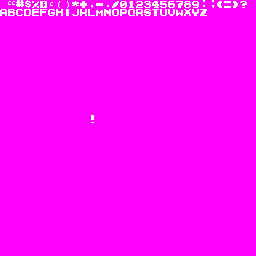
<style>
.page{position:relative;width:256px;height:256px;background:#ff00ff}
.page>*{position:absolute;margin:0}
.t1{font:8px "Toronto";color:#ffffff}
.t2{font:6.4px "Toronto";color:#ffffff}
.t3{font:7.4px "Toronto";color:#ffffff}
.t4{font:8px "MyriadPro-Regular";color:#ffffff}
.t5{font:7px "Toronto";color:#ffffff}
.t6{font:7.5px "Toronto";color:#ffffff}
.t7{font:7.3px "Toronto";color:#ffffff}
.t8{font:6.3px "Toronto";color:#ffffff}
.t9{font:7.2px "Toronto";color:#ffffff}
</style>
<div class="page">
<p class="t1" style="left:8px;top:1px;width:7px;height:4px">“</p>
<p class="t1" style="left:16px;top:0px;width:8px;height:7px">#</p>
<p class="t2" style="left:25px;top:0px;width:6px;height:8px">$</p>
<p class="t3" style="left:32px;top:1px;width:7px;height:7px">%</p>
<p class="t3" style="left:40px;top:1px;width:7px;height:7px">&amp;</p>
<p class="t1" style="left:50px;top:2px;width:3px;height:4px">‘</p>
<p class="t4" style="left:58px;top:1px;width:2px;height:7px">(</p>
<p class="t4" style="left:67px;top:1px;width:2px;height:7px">)</p>
<p class="t1" style="left:72px;top:1px;width:7px;height:5px">*</p>
<p class="t5" style="left:80px;top:1px;width:7px;height:7px">+</p>
<p class="t5" style="left:91px;top:5px;width:2px;height:3px">,</p>
<p class="t5" style="left:112px;top:1px;width:7px;height:7px">/</p>
<p class="t5" style="left:120px;top:1px;width:7px;height:7px">0</p>
<p class="t5" style="left:129px;top:1px;width:5px;height:7px">1</p>
<p class="t5" style="left:136px;top:1px;width:7px;height:7px">2</p>
<p class="t5" style="left:144px;top:1px;width:7px;height:7px">3</p>
<p class="t5" style="left:152px;top:1px;width:7px;height:7px">4</p>
<p class="t5" style="left:160px;top:1px;width:7px;height:7px">5</p>
<p class="t5" style="left:168px;top:1px;width:7px;height:7px">6</p>
<p class="t5" style="left:176px;top:1px;width:7px;height:7px">7</p>
<p class="t5" style="left:184px;top:1px;width:7px;height:7px">8</p>
<p class="t5" style="left:192px;top:1px;width:7px;height:7px">9</p>
<p class="t5" style="left:203px;top:0px;width:2px;height:7px">:</p>
<p class="t5" style="left:212px;top:0px;width:2px;height:8px">;</p>
<p class="t5" style="left:217px;top:1px;width:5px;height:7px">&lt;</p>
<p class="t5" style="left:224px;top:1px;width:7px;height:7px">=</p>
<p class="t5" style="left:233px;top:1px;width:5px;height:7px;rotate:180deg">&lt;</p>
<p class="t5" style="left:240px;top:1px;width:7px;height:7px">?</p>
<p class="t6" style="left:0px;top:9px;width:7px;height:7px">A</p>
<p class="t7" style="left:8px;top:9px;width:7px;height:7px">B</p>
<p class="t3" style="left:16px;top:9px;width:7px;height:7px">C</p>
<p class="t3" style="left:24px;top:9px;width:7px;height:7px">D</p>
<p class="t3" style="left:32px;top:9px;width:7px;height:7px">E</p>
<p class="t6" style="left:40px;top:9px;width:7px;height:7px">F</p>
<p class="t6" style="left:48px;top:9px;width:7px;height:7px">G</p>
<p class="t6" style="left:56px;top:9px;width:7px;height:7px">H</p>
<p class="t7" style="left:72px;top:9px;width:7px;height:7px">J</p>
<p class="t3" style="left:80px;top:9px;width:7px;height:7px">K</p>
<p class="t3" style="left:88px;top:9px;width:7px;height:7px">L</p>
<p class="t8" style="left:96px;top:10px;width:7px;height:6px">M</p>
<p class="t7" style="left:104px;top:9px;width:7px;height:7px">N</p>
<p class="t6" style="left:112px;top:9px;width:7px;height:7px">O</p>
<p class="t7" style="left:120px;top:9px;width:7px;height:7px">P</p>
<p class="t3" style="left:128px;top:9px;width:7px;height:7px">Q</p>
<p class="t3" style="left:136px;top:9px;width:7px;height:7px">R</p>
<p class="t6" style="left:144px;top:9px;width:7px;height:7px">S</p>
<p class="t9" style="left:152px;top:9px;width:7px;height:7px">T</p>
<p class="t3" style="left:160px;top:9px;width:7px;height:7px">U</p>
<p class="t3" style="left:168px;top:9px;width:7px;height:7px">V</p>
<p class="t2" style="left:176px;top:10px;width:7px;height:6px">W</p>
<p class="t7" style="left:184px;top:9px;width:7px;height:7px">X</p>
<p class="t6" style="left:192px;top:9px;width:7px;height:7px">Y</p>
<p class="t3" style="left:200px;top:9px;width:7px;height:7px">Z</p>
<p class="t1" style="left:91px;top:115px;width:3px;height:8px">!</p>
</div>
